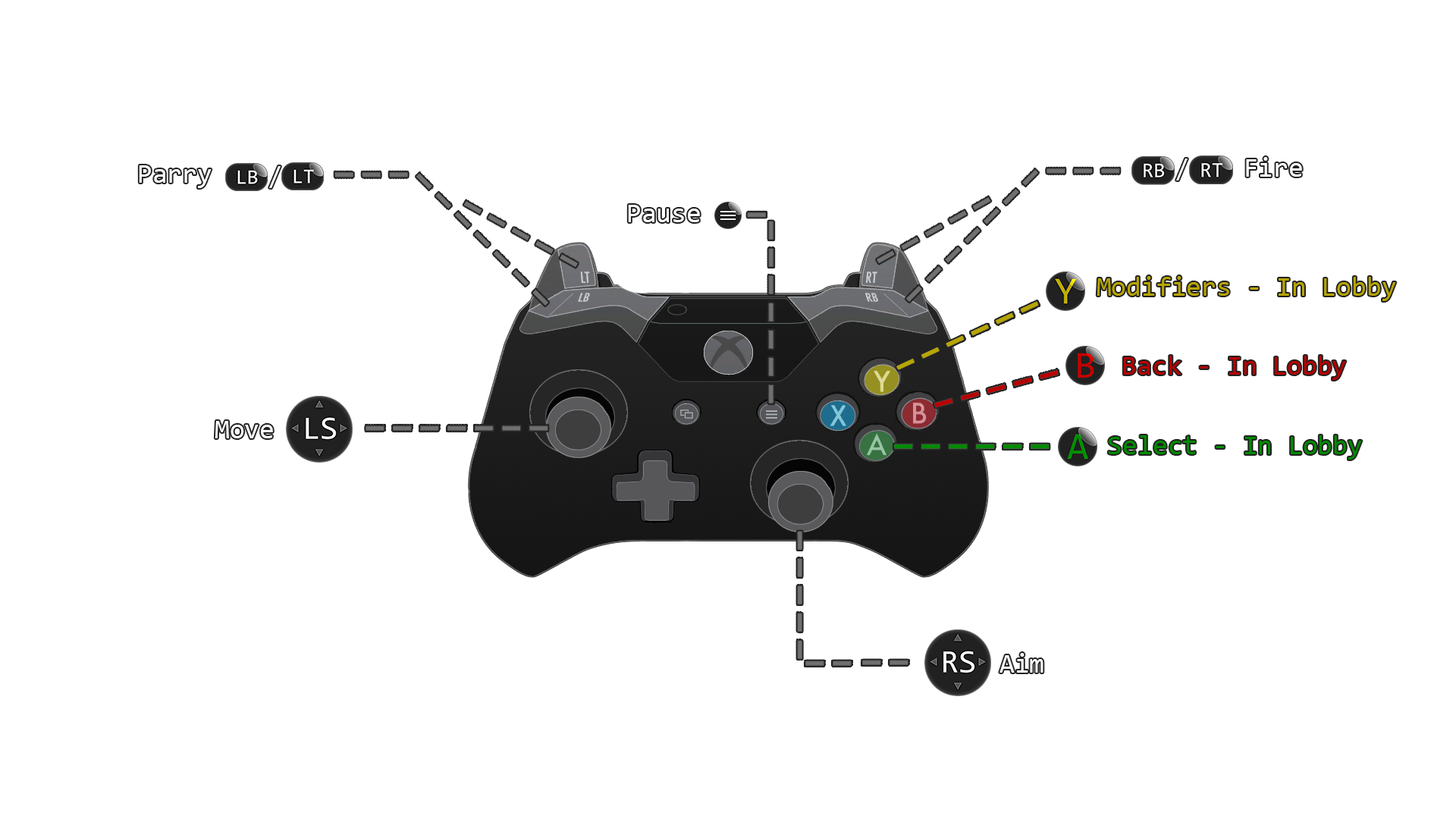
<style>
.page{position:relative;width:1456px;height:819px;background:#ffffff}
.page>*{position:absolute;margin:0}
.t1{font:27.3px "Consolas";color:#ffffff}
.t2{font:27.3px "Consolas";color:#b7a500}
.t3{font:27.3px "Consolas";color:#b90000}
.t4{font:27.3px "Consolas";color:#008b00}
</style>
<div class="page">
<p class="t1" style="left:1246px;top:157px;width:56px;height:20px">Fire</p>
<p class="t1" style="left:628px;top:205px;width:72px;height:17px">Pause</p>
<p class="t2" style="left:1097px;top:276px;width:299px;height:25px">Modifiers - In Lobby</p>
<p class="t3" style="left:1123px;top:356px;width:223px;height:24px">Back - In Lobby</p>
<p class="t1" style="left:215px;top:421px;width:58px;height:17px">Move</p>
<p class="t4" style="left:1108px;top:435px;width:254px;height:25px">Select - In Lobby</p>
<p class="t1" style="left:999px;top:653px;width:44px;height:20px">Aim</p>
</div>
